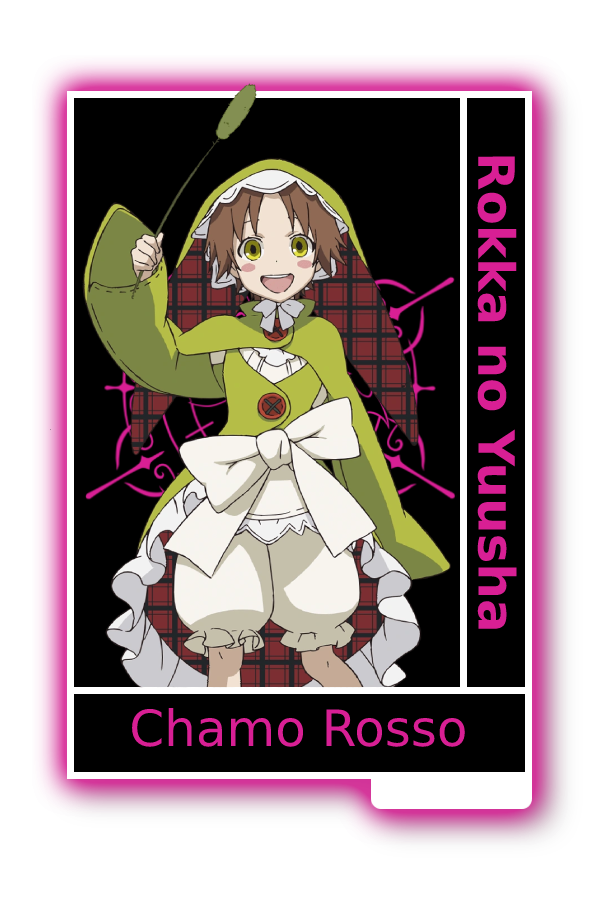
<style>
.page{position:relative;width:600px;height:900px;background:#000000}
.page>*{position:absolute;margin:0}
.t1{font:50px "MADETOMMY-Bold";color:#d81f94}
.t2{font:50px "CoolveticaRg-Regular";color:#d81f94}
</style>
<div class="page">
<p class="t1" style="left:477px;top:156px;width:40px;height:473px;rotate:90deg">Rokka no Yuusha</p>
<p class="t2" style="left:132px;top:708px;width:333px;height:39px">Chamo Rosso</p>
</div>
